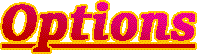
<style>
.page{position:relative;width:197px;height:54px;background:#ffffff}
.page>*{position:absolute;margin:0}
.t1{font:52.9px "SitkaText-BoldItalic";font-weight:bold;scale:0.93 1}
</style>
<div class="page">
<p class="t1" style="left:2px;top:2px;width:193px;height:50px">Options</p>
</div>
